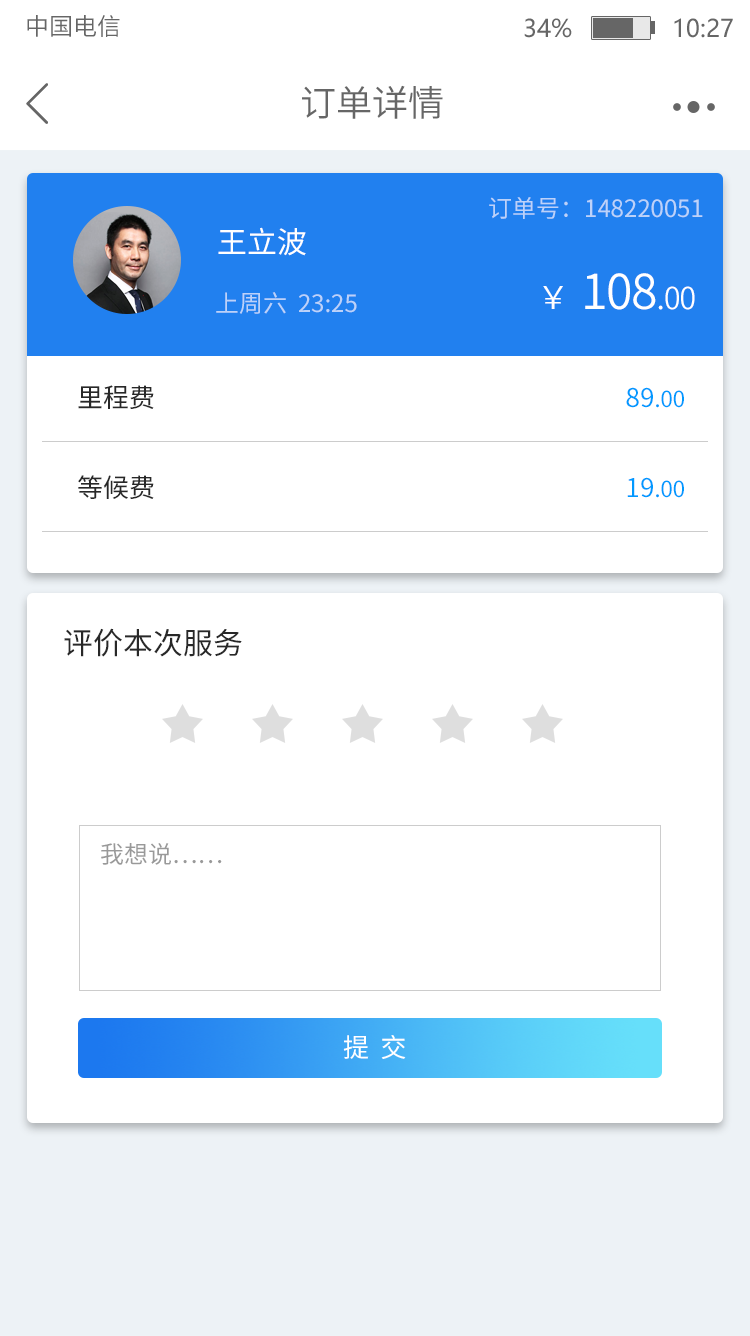
<style>
.page{position:relative;width:750px;height:1336px;background:#ffffff}
.page>*{position:absolute;margin:0}
.t1{font:24px "SourceHanSansCN-Normal";color:#666666}
.t2{font:24px "MicrosoftYaHei";color:#666666}
.t3{font:36px "SourceHanSansCN-Normal";color:#666666}
.t4{font:24px "SourceHanSansCN-Regular";color:#bcd2f9}
.t5{font:30px "SourceHanSansCN-Regular";color:#ffffff}
.t6{font:48.2px "SourceHanSansCN-Normal";letter-spacing:-0.025em;color:#ffffff}
.t7{font:32.2px "SourceHanSansCN-Normal";letter-spacing:-0.025em;color:#ffffff}
.t8{font:30px "SourceHanSansCN-Normal";letter-spacing:-0.025em;color:#ffffff}
.t9{font:26px/90px "SourceHanSansCN-Regular";color:#282828}
.t10{font:22px/90px "SourceHanSansCN-Regular";color:#0099ff}
.t11{font:26px/90px "SourceHanSansCN-Regular";color:#0099ff}
.t12{font:30px "SourceHanSansCN-Regular";color:#282828}
.t13{font:24px "SourceHanSansCN-Regular";color:#999999}
.t14{font:26px "SourceHanSansCN-Regular";color:#ffffff}
</style>
<div class="page">
<p class="t1" style="left:27px;top:15px;width:93px;height:22px">中国电信</p>
<p class="t2" style="left:524px;top:18px;width:209px;height:20px">34%              10:27</p>
<p class="t3" style="left:302px;top:85px;width:141px;height:34px">订单详情</p>
<p class="t4" style="left:489px;top:197px;width:214px;height:22px">订单号：148220051</p>
<p class="t5" style="left:218px;top:227px;width:88px;height:29px">王立波</p>
<p class="t6" style="left:543px;top:273px;width:152px;height:37px"><span class="t7">￥  </span>108<span class="t8">.00</span></p>
<p class="t4" style="left:216px;top:292px;width:141px;height:22px">上周六  23:25</p>
<p class="t9" style="left:78px;top:385px;width:76px;height:114px;text-align:right">里程费<br>等候费</p>
<p class="t10" style="left:626px;top:387px;width:58px;height:111px;text-align:right"><span class="t11">89</span>.00<br><span class="t11">19</span>.00</p>
<p class="t12" style="left:64px;top:628px;width:178px;height:29px">评价本次服务</p>
<p class="t13" style="left:101px;top:843px;width:121px;height:22px">我想说……</p>
<p class="t14" style="left:343px;top:1035px;width:63px;height:24px">提  交</p>
</div>
